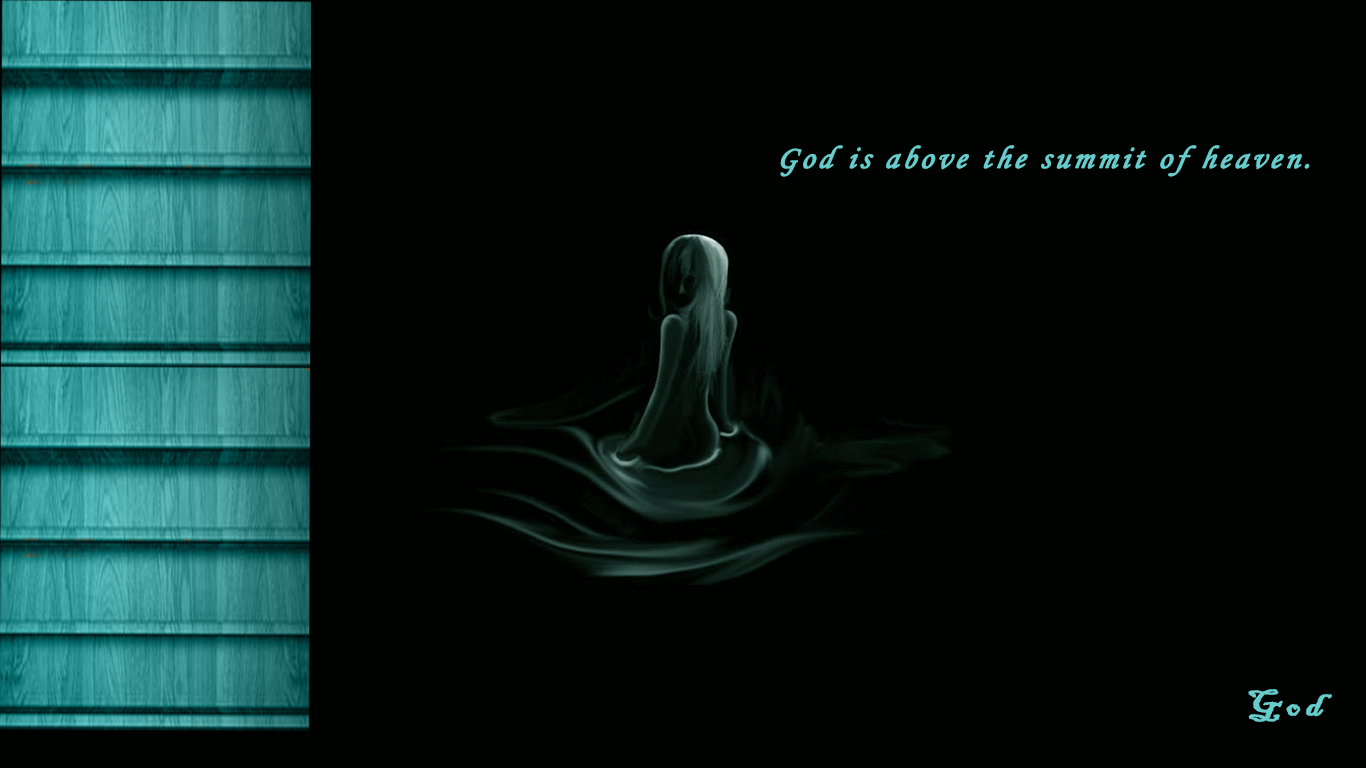
<style>
.page{position:relative;width:1366px;height:768px;background:#000200}
.page>*{position:absolute;margin:0}
.t1{font:32px "MonotypeCorsiva";letter-spacing:0.1em;color:#66cccc;font-weight:bold;font-style:italic}
.t2{font:38.4px "BlackadderITC-Regular";letter-spacing:0.1em;color:#66cccc;font-weight:bold;scale:1.11 1}
</style>
<div class="page">
<p class="t1" style="left:780px;top:145px;width:530px;height:32px">God is above the summit of heaven.</p>
<p class="t2" style="left:1248px;top:689px;width:84px;height:33px">God</p>
</div>
